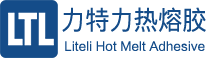
<style>
.page{position:relative;width:208px;height:58px;background:#ffffff}
.page>*{position:absolute;margin:0}
.t1{font:26px "PingFangSC-Regular";letter-spacing:0.005em;color:#144c89;scale:0.93 1}
.t2{font:12px "FZLTHJW--GB1-0";letter-spacing:0.02em;color:#144c89}
</style>
<div class="page">
<p class="t1" style="left:62px;top:7px;width:144px;height:25px">力特力热熔胶</p>
<p class="t2" style="left:65px;top:41px;width:140px;height:10px">Liteli Hot Melt Adhesive</p>
</div>
